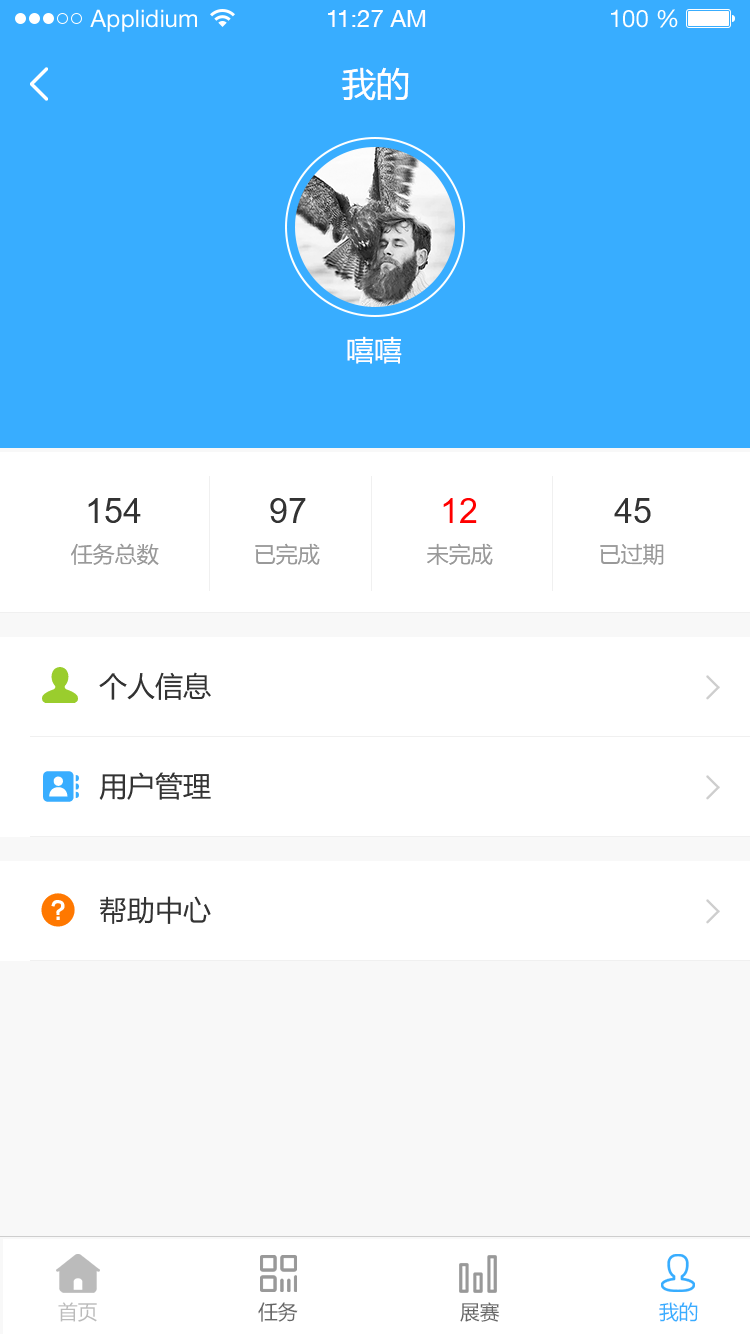
<style>
.page{position:relative;width:750px;height:1334px;background:#ffffff}
.page>*{position:absolute;margin:0}
.t1{font:24px "HelveticaNeueLTStd-Roman";color:#ffffff}
.t2{font:24px "HelveticaNeueCE-Roman";color:#ffffff}
.t3{font:34px "MicrosoftYaHei";color:#ffffff}
.t4{font:28px "MicrosoftYaHei";color:#ffffff}
.t5{font:34px "ArialMT";color:#333333}
.t6{font:34px "ArialMT";color:#ff0000}
.t7{font:22px "MicrosoftYaHei";color:#999999}
.t8{font:28px "MicrosoftYaHei";color:#333333}
.t9{font:20px "MicrosoftYaHei";color:#bbbbbb;text-transform:uppercase}
.t10{font:20px "MicrosoftYaHei";color:#666666;text-transform:uppercase}
.t11{font:20px "MicrosoftYaHei";color:#38adff;text-transform:uppercase}
</style>
<div class="page">
<p class="t1" style="left:90px;top:9px;width:107px;height:23px">Applidium</p>
<p class="t2" style="left:328px;top:10px;width:98px;height:17px">11:27 AM</p>
<p class="t1" style="left:611px;top:9px;width:67px;height:19px">100 %</p>
<p class="t3" style="left:342px;top:67px;width:67px;height:34px">我的</p>
<p class="t4" style="left:347px;top:336px;width:55px;height:28px">嘻嘻</p>
<p class="t5" style="left:88px;top:498px;width:53px;height:25px">154</p>
<p class="t5" style="left:270px;top:498px;width:36px;height:25px">97</p>
<p class="t6" style="left:443px;top:498px;width:34px;height:25px">12</p>
<p class="t5" style="left:614px;top:498px;width:37px;height:25px">45</p>
<p class="t7" style="left:71px;top:543px;width:88px;height:22px">任务总数</p>
<p class="t7" style="left:255px;top:543px;width:65px;height:22px">已完成</p>
<p class="t7" style="left:427px;top:543px;width:66px;height:22px">未完成</p>
<p class="t7" style="left:600px;top:543px;width:64px;height:22px">已过期</p>
<p class="t8" style="left:99px;top:672px;width:112px;height:28px">个人信息</p>
<p class="t8" style="left:99px;top:772px;width:112px;height:28px">用户管理</p>
<p class="t8" style="left:100px;top:896px;width:111px;height:28px">帮助中心</p>
<p class="t9" style="left:58px;top:1302px;width:39px;height:20px">首页</p>
<p class="t10" style="left:258px;top:1302px;width:40px;height:20px">任务</p>
<p class="t10" style="left:460px;top:1302px;width:40px;height:20px">展赛</p>
<p class="t11" style="left:659px;top:1302px;width:39px;height:20px">我的</p>
</div>
